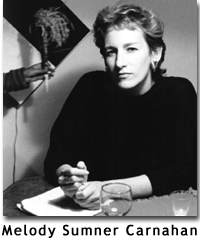
<style>
.page{position:relative;width:200px;height:243px}
.page>*{position:absolute;margin:0}
.t1{font:14px "TrebuchetMS";letter-spacing:0.1em;color:#000000;font-weight:bold}
</style>
<div class="page">
<p class="t1" style="left:2px;top:224px;width:195px;height:14px">Melody Sumner Carnahan</p>
</div>
